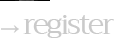
<style>
.page{position:relative;width:115px;height:50px;background:#ffffff}
.page>*{position:absolute;margin:0}
.t1{font:30px "Trirong-Regular";letter-spacing:-0.075em;color:#cacaca}
</style>
<div class="page">
<p class="t1" style="left:1px;top:15px;width:113px;height:23px">→register</p>
</div>
